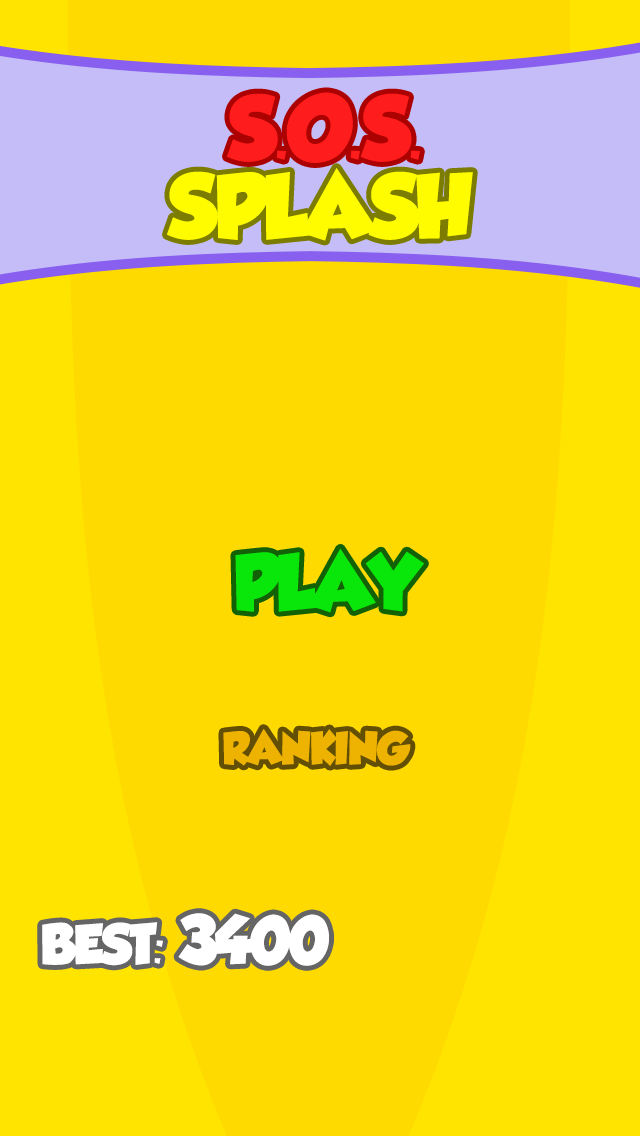
<style>
.page{position:relative;width:640px;height:1136px;background:#ffda00}
.page>*{position:absolute;margin:0}
.t1{font:80px "GROBOLD";letter-spacing:-0.03em;color:#ff1c1c}
.t2{font:80px "GROBOLD";letter-spacing:-0.03em;color:#fffc00}
.t3{font:70px "GROBOLD";letter-spacing:-0.03em;color:#09e609}
.t4{font:40px "GROBOLD";letter-spacing:-0.03em;color:#eeb300}
.t5{font:60px "GROBOLD";letter-spacing:-0.03em;color:#ffffff}
.t6{font:50px "GROBOLD";letter-spacing:-0.03em;color:#ffffff}
</style>
<div class="page">
<p class="t1" style="left:227px;top:92px;width:193px;height:71px">S.O.S.</p>
<p class="t2" style="left:167px;top:168px;width:306px;height:73px">SPLASH</p>
<p class="t3" style="left:235px;top:548px;width:189px;height:65px">PLAY</p>
<p class="t4" style="left:223px;top:729px;width:188px;height:37px">RANKING</p>
<p class="t5" style="left:178px;top:913px;width:151px;height:53px">3400</p>
<p class="t6" style="left:42px;top:922px;width:121px;height:44px">BEST:</p>
</div>
